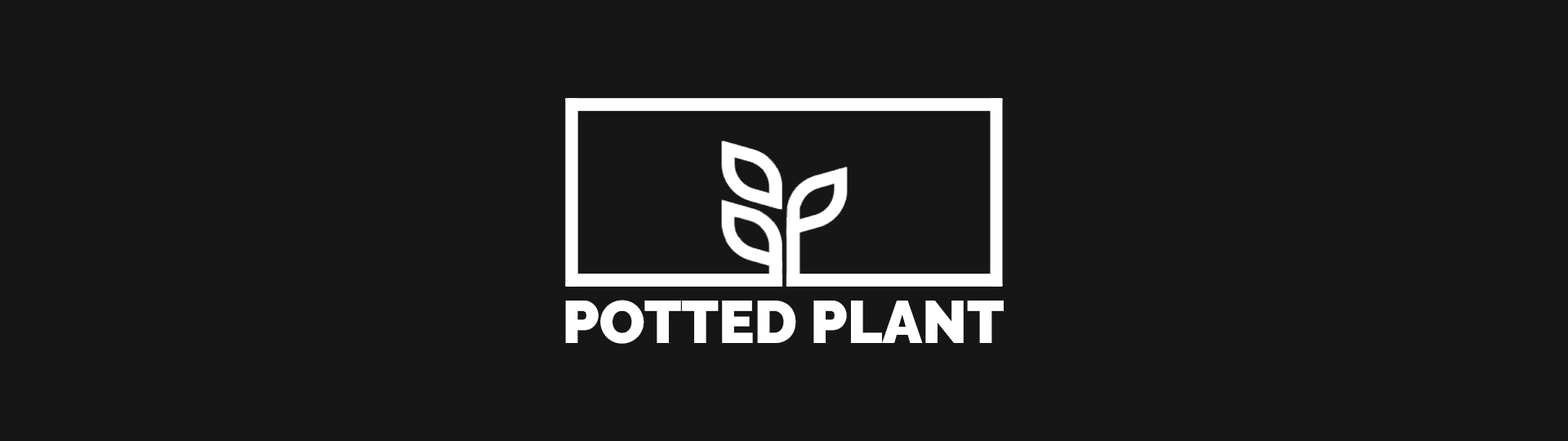
<style>
.page{position:relative;width:1568px;height:441px;background:#161616}
.page>*{position:absolute;margin:0}
.t1{font:59.6px "Raleway-Black";color:#ffffff}
</style>
<div class="page">
<p class="t1" style="left:565px;top:300px;width:439px;height:44px">POTTED PLANT</p>
</div>
